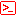
<style>
.page{position:relative;width:16px;height:16px;background:#ffffff}
.page>*{position:absolute;margin:0}
.t1{font:13.3px "Arial-BoldMT";color:#ff0000}
</style>
<div class="page">
<p class="t1" style="left:3px;top:4px;width:6px;height:7px">&gt;</p>
</div>
